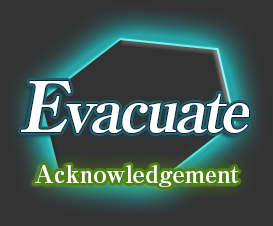
<style>
.page{position:relative;width:273px;height:226px;background:#333333}
.page>*{position:absolute;margin:0}
.t1{font:60px "RyuminPro-ExBold";letter-spacing:-0.06em;color:#ffffff;font-style:italic}
.t2{font:70px "RyuminPro-ExBold";letter-spacing:-0.06em;color:#ffffff;font-style:italic}
.t3{font:24px "RyuminPro-ExBold";color:#ffffff}
</style>
<div class="page">
<p class="t1" style="left:21px;top:81px;width:228px;height:52px"><span class="t2">E</span>vacuate</p>
<p class="t3" style="left:35px;top:165px;width:204px;height:22px">Acknowledgement</p>
</div>
